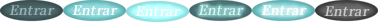
<style>
.page{position:relative;width:378px;height:22px}
.page>*{position:absolute;margin:0}
.t1{font:16px "OfficialFateFont-Medium";color:#97b2b3;font-weight:bold;font-style:italic}
.t2{font:16px "OfficialFateFont-Medium";color:#ffffff;font-weight:bold;font-style:italic}
.t3{font:16px "OfficialFateFont-Medium";color:#d6f5f2;font-weight:bold;font-style:italic}
.t4{font:16px "OfficialFateFont-Medium";color:#cacaca;font-weight:bold;font-style:italic}
</style>
<div class="page">
<p class="t1" style="left:9px;top:5px;width:46px;height:11px">Entrar</p>
<p class="t2" style="left:72px;top:5px;width:46px;height:11px">Entrar</p>
<p class="t2" style="left:135px;top:6px;width:46px;height:11px">Entrar</p>
<p class="t3" style="left:198px;top:5px;width:46px;height:11px">Entrar</p>
<p class="t2" style="left:261px;top:5px;width:46px;height:11px">Entrar</p>
<p class="t4" style="left:324px;top:6px;width:46px;height:11px">Entrar</p>
</div>
